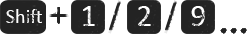
<style>
.page{position:relative;width:247px;height:34px;background:#232323}
.page>*{position:absolute;margin:0}
.t1{font:31.2px "Calibri";color:#ffffff}
.t2{font:20.3px "Calibri";color:#fefefe}
</style>
<div class="page">
<p class="t1" style="left:83px;top:6px;width:12px;height:20px">1</p>
<p class="t1" style="left:138px;top:6px;width:13px;height:20px">2</p>
<p class="t1" style="left:191px;top:6px;width:14px;height:20px">9</p>
<p class="t2" style="left:6px;top:9px;width:36px;height:14px">Shift</p>
</div>
